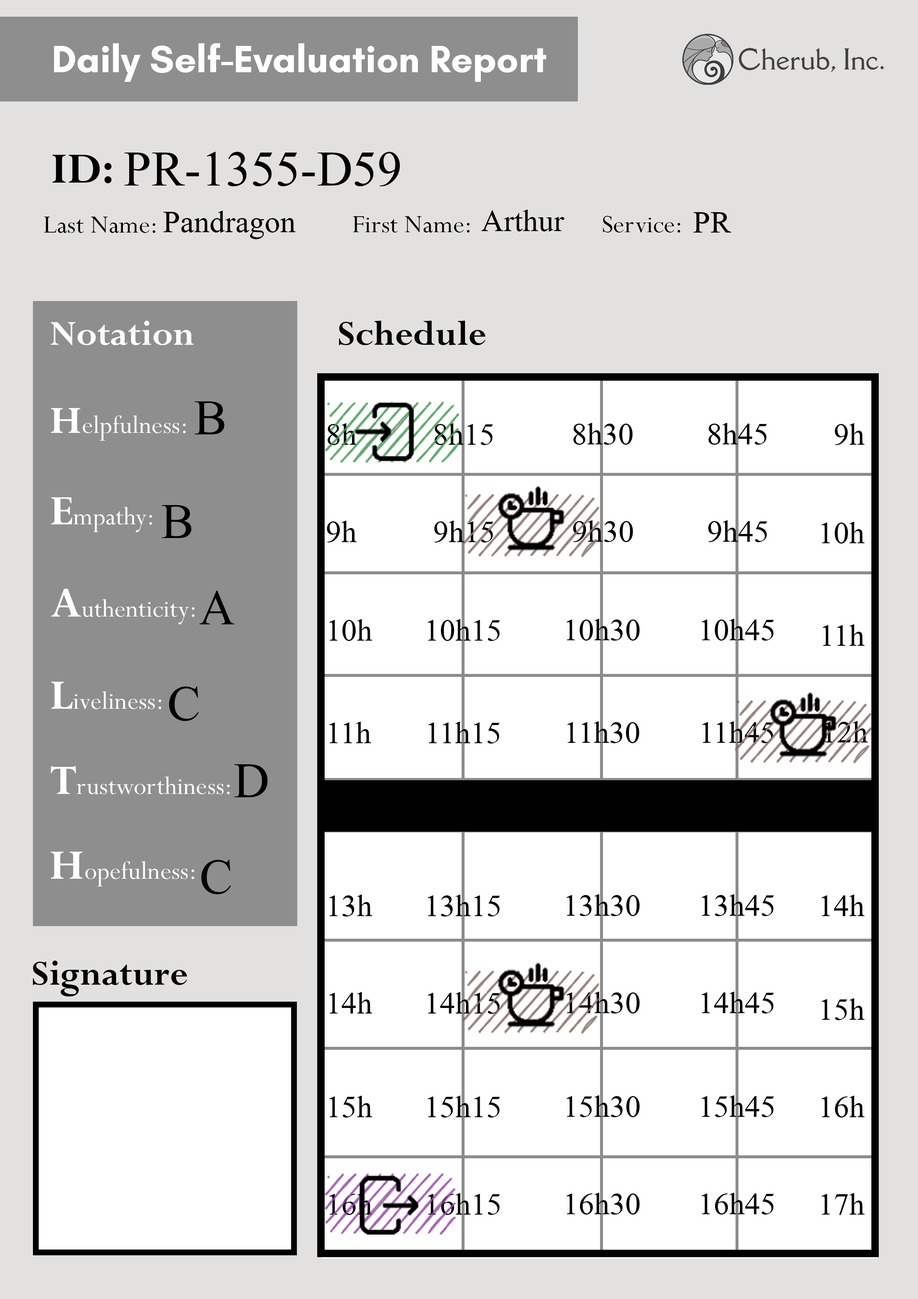
<style>
.page{position:relative;width:918px;height:1299px;background:#ffffff}
.page>*{position:absolute;margin:0}
.t1{font:74px "Microsoft-Himalaya";color:#000000}
.t2{font:46.3px "Microsoft-Himalaya";color:#000000}
</style>
<div class="page">
<p class="t1" style="left:124px;top:152px;width:276px;height:34px">PR-1355-D59</p>
<p class="t2" style="left:481px;top:210px;width:84px;height:21px">Arthur</p>
<p class="t2" style="left:163px;top:211px;width:133px;height:28px">Pandragon</p>
<p class="t2" style="left:693px;top:212px;width:39px;height:20px">PR</p>
<p class="t1" style="left:195px;top:401px;width:30px;height:33px">B</p>
<p class="t2" style="left:328px;top:423px;width:29px;height:22px">8h</p>
<p class="t2" style="left:435px;top:423px;width:58px;height:22px">8h15</p>
<p class="t2" style="left:573px;top:423px;width:60px;height:22px">8h30</p>
<p class="t2" style="left:709px;top:423px;width:58px;height:22px">8h45</p>
<p class="t2" style="left:835px;top:423px;width:30px;height:22px">9h</p>
<p class="t1" style="left:162px;top:505px;width:30px;height:33px">B</p>
<p class="t2" style="left:327px;top:521px;width:30px;height:21px">9h</p>
<p class="t2" style="left:434px;top:521px;width:60px;height:21px">9h15</p>
<p class="t2" style="left:573px;top:520px;width:60px;height:22px">9h30</p>
<p class="t2" style="left:708px;top:520px;width:59px;height:22px">9h45</p>
<p class="t2" style="left:822px;top:522px;width:43px;height:21px">10h</p>
<p class="t1" style="left:200px;top:591px;width:35px;height:33px">A</p>
<p class="t2" style="left:329px;top:619px;width:43px;height:22px">10h</p>
<p class="t2" style="left:428px;top:619px;width:72px;height:22px">10h15</p>
<p class="t2" style="left:566px;top:619px;width:74px;height:21px">10h30</p>
<p class="t2" style="left:702px;top:619px;width:72px;height:21px">10h45</p>
<p class="t2" style="left:823px;top:624px;width:42px;height:22px">11h</p>
<p class="t1" style="left:169px;top:686px;width:30px;height:35px">C</p>
<p class="t2" style="left:329px;top:722px;width:42px;height:21px">11h</p>
<p class="t2" style="left:428px;top:722px;width:72px;height:21px">11h15</p>
<p class="t2" style="left:567px;top:721px;width:72px;height:22px">11h30</p>
<p class="t2" style="left:702px;top:721px;width:72px;height:22px">11h45</p>
<p class="t2" style="left:825px;top:721px;width:43px;height:21px">12h</p>
<p class="t1" style="left:234px;top:764px;width:34px;height:33px">D</p>
<p class="t1" style="left:201px;top:860px;width:30px;height:34px">C</p>
<p class="t2" style="left:329px;top:894px;width:43px;height:22px">13h</p>
<p class="t2" style="left:428px;top:894px;width:72px;height:22px">13h15</p>
<p class="t2" style="left:566px;top:894px;width:74px;height:22px">13h30</p>
<p class="t2" style="left:702px;top:894px;width:72px;height:22px">13h45</p>
<p class="t2" style="left:822px;top:894px;width:43px;height:22px">14h</p>
<p class="t2" style="left:329px;top:992px;width:43px;height:21px">14h</p>
<p class="t2" style="left:428px;top:992px;width:72px;height:22px">14h15</p>
<p class="t2" style="left:566px;top:991px;width:74px;height:22px">14h30</p>
<p class="t2" style="left:702px;top:991px;width:72px;height:22px">14h45</p>
<p class="t2" style="left:822px;top:998px;width:43px;height:22px">15h</p>
<p class="t2" style="left:329px;top:1095px;width:43px;height:22px">15h</p>
<p class="t2" style="left:428px;top:1095px;width:72px;height:22px">15h15</p>
<p class="t2" style="left:566px;top:1095px;width:74px;height:22px">15h30</p>
<p class="t2" style="left:702px;top:1095px;width:72px;height:22px">15h45</p>
<p class="t2" style="left:822px;top:1095px;width:43px;height:22px">16h</p>
<p class="t2" style="left:329px;top:1193px;width:43px;height:22px">16h</p>
<p class="t2" style="left:428px;top:1193px;width:72px;height:22px">16h15</p>
<p class="t2" style="left:566px;top:1192px;width:74px;height:22px">16h30</p>
<p class="t2" style="left:702px;top:1192px;width:72px;height:22px">16h45</p>
<p class="t2" style="left:822px;top:1193px;width:43px;height:22px">17h</p>
</div>
